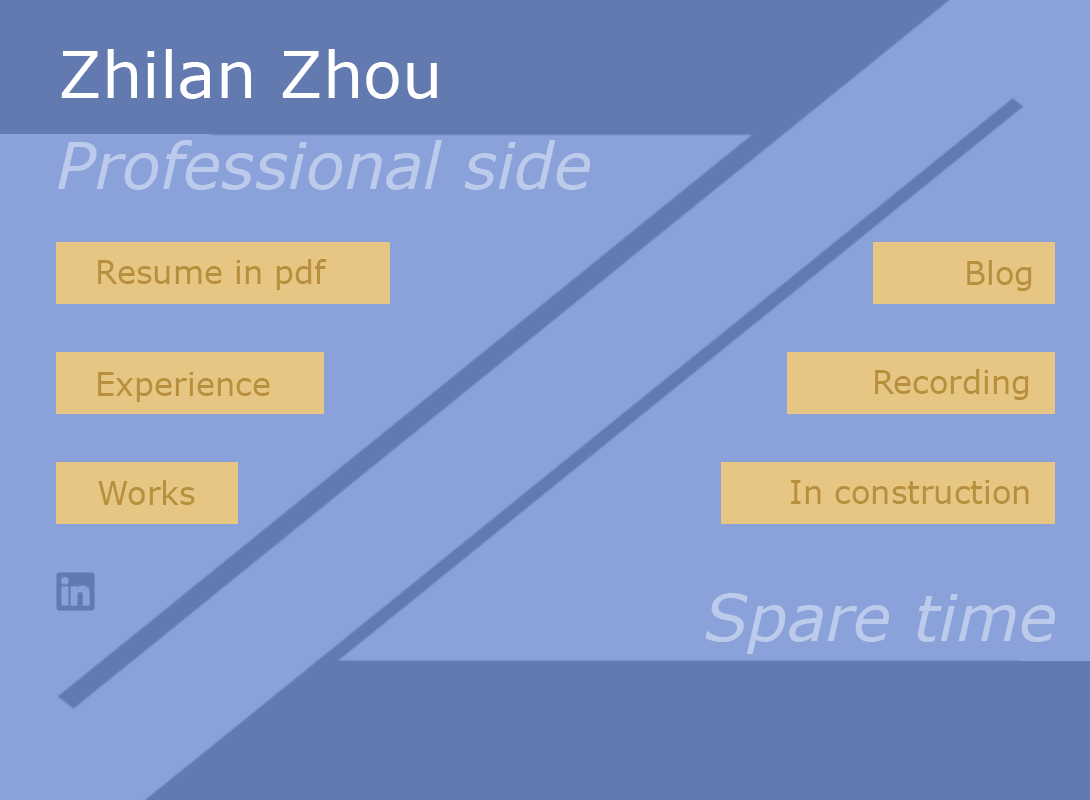
<style>
.page{position:relative;width:1090px;height:800px;background:#8aa2d9}
.page>*{position:absolute;margin:0}
.t1{font:64px "Verdana";color:#ffffff}
.t2{font:64px "Verdana-Italic";color:#bccbeb}
.t3{font:32px "Verdana";color:#b88f3d}
</style>
<div class="page">
<p class="t1" style="left:61px;top:49px;width:376px;height:50px">Zhilan Zhou</p>
<p class="t2" style="left:58px;top:140px;width:532px;height:50px">Professional side</p>
<p class="t3" style="left:98px;top:259px;width:229px;height:31px">Resume in pdf</p>
<p class="t3" style="left:967px;top:260px;width:65px;height:31px">Blog</p>
<p class="t3" style="left:98px;top:372px;width:172px;height:30px">Experience</p>
<p class="t3" style="left:875px;top:369px;width:154px;height:31px">Recording</p>
<p class="t3" style="left:98px;top:480px;width:97px;height:25px">Works</p>
<p class="t3" style="left:791px;top:480px;width:238px;height:24px">In construction</p>
<p class="t2" style="left:705px;top:593px;width:350px;height:61px">Spare time</p>
</div>
